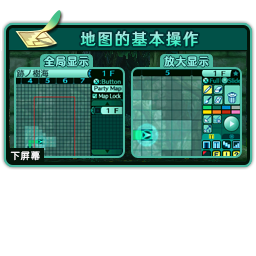
<style>
.page{position:relative;width:256px;height:256px;background:#ffffff}
.page>*{position:absolute;margin:0}
.t1{font:16px "HYWenHei-FEW";letter-spacing:0.105em;scale:0.97 1}
.t2{font:10.7px "FZFW-QingYinTiS-B--GB1-0";letter-spacing:0.105em;color:#8aeee1;scale:0.97 1}
.t3{font:9.3px "FZY3--GB1-4";letter-spacing:0.105em;color:#ffffff;scale:0.97 1}
</style>
<div class="page">
<p class="t1" style="left:80px;top:31px;width:118px;height:16px">地图的基本操作</p>
<p class="t2" style="left:44px;top:56px;width:45px;height:11px">全局显示</p>
<p class="t2" style="left:164px;top:56px;width:45px;height:11px">放大显示</p>
<p class="t3" style="left:10px;top:151px;width:30px;height:10px">下屏幕</p>
</div>
